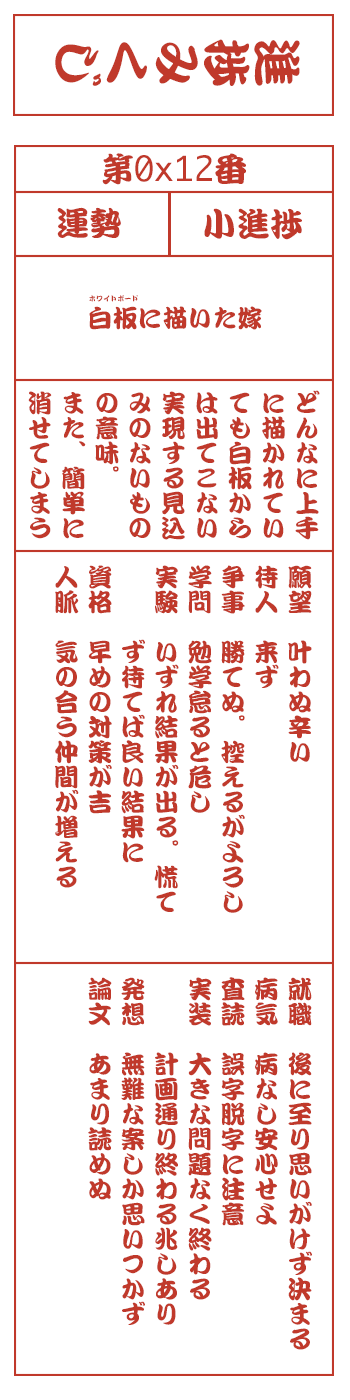
<style>
.page{position:relative;width:350px;height:1400px;background:#ffffff}
.page>*{position:absolute;margin:0}
.t1{font:50px "DFKanTeiRyu-XB-MP-RKSJ-H";color:#c0392b}
.t2{font:33.3px "Monaco";color:#c0392b}
.t3{font:33.3px "DFKanTeiRyu-XB-MP-RKSJ-H";color:#c0392b}
.t4{font:7.1px "DFKanTeiRyu-XB-MP-RKSJ-H";color:#c0392b}
.t5{font:25px "DFKanTeiRyu-XB-MP-RKSJ-H";color:#c0392b}
.t6{font:25px/33.3px "DFKanTeiRyu-XB-MP-RKSJ-H";color:#c0392b}
</style>
<div class="page">
<p class="t1" style="left:55px;top:39px;width:245px;height:47px;rotate:90deg">進捗みくじ</p>
<p class="t2" style="left:102px;top:153px;width:144px;height:32px"><span class="t3">第</span>0x12<span class="t3">番</span></p>
<p class="t3" style="left:57px;top:207px;width:64px;height:31px">運勢</p>
<p class="t3" style="left:204px;top:208px;width:98px;height:32px">小進捗</p>
<p class="t4" style="left:89px;top:295px;width:49px;height:7px">ホワイトボード</p>
<p class="t5" style="left:89px;top:306px;width:173px;height:24px">白板に描いた嫁</p>
<p class="t6" style="left:28px;top:390px;width:292px;height:150px">どんなに上手<br>に描かれてい<br>ても白板から<br>は出てこない<br>実現する見込<br>みのないもの<br>の意味。<br>また、簡単に<br>消せてしまう</p>
<p class="t6" style="left:55px;top:565px;width:257px;height:348px">願望　叶わぬ辛い<br>待人　来ず<br>争事　勝てぬ。控えるがよろし<br>学問　勉学怠ると危し<br>実験　いずれ結果が出る。慌て<br>　　　ず待てば良い結果に<br>資格　早めの対策が吉<br>人脈　気の合う仲間が増える</p>
<p class="t6" style="left:88px;top:977px;width:224px;height:373px">就職　後に至り思いがけず決まる<br>病気　病なし安心せよ<br>査読　誤字脱字に注意<br>実装　大きな問題なく終わる<br>　　　計画通り終わる兆しあり<br>発想　無難な案しか思いつかず<br>論文　あまり読めぬ</p>
</div>
